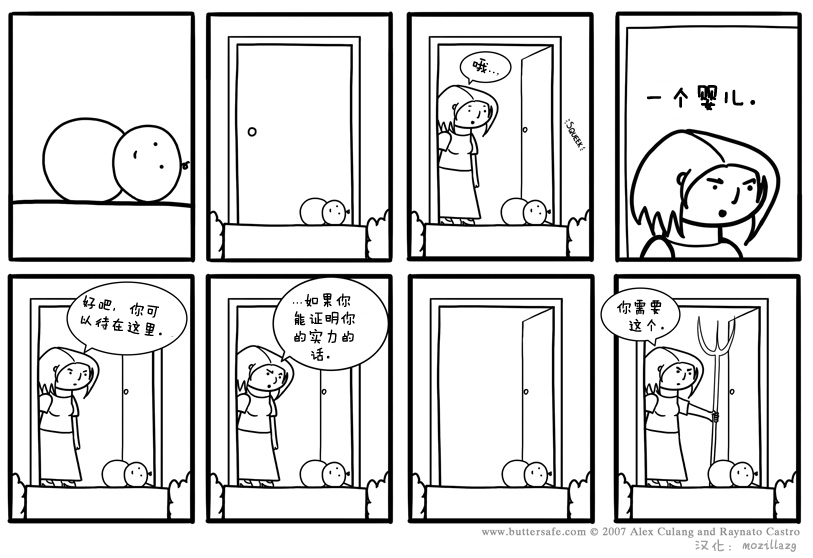
<style>
.page{position:relative;width:813px;height:558px;background:#ffffff}
.page>*{position:absolute;margin:0}
.t1{font:18px "FZMWJW--GB1-0";color:#000000}
.t2{font:26px "FZMWJW--GB1-0";color:#000000;font-weight:bold}
.t3{font:16px/18px "FZMWJW--GB1-0";color:#000000}
.t4{font:16px "FZMWJW--GB1-0";color:#9f9f9f}
</style>
<div class="page">
<p class="t1" style="left:472px;top:58px;width:27px;height:17px;rotate:18deg">哦...</p>
<p class="t2" style="left:646px;top:85px;width:110px;height:26px">一个婴儿。</p>
<p class="t3" style="left:292px;top:293px;width:63px;height:68px">...如果你<br>能证明你<br>的实力的<br>   话。</p>
<p class="t3" style="left:80px;top:295px;width:82px;height:41px;rotate:8deg">好吧，你可<br>以待在这里。</p>
<p class="t3" style="left:617px;top:299px;width:47px;height:33px">你需要<br>  这个。</p>
<p class="t4" style="left:695px;top:539px;width:101px;height:13px">汉化：mozillazg</p>
</div>
